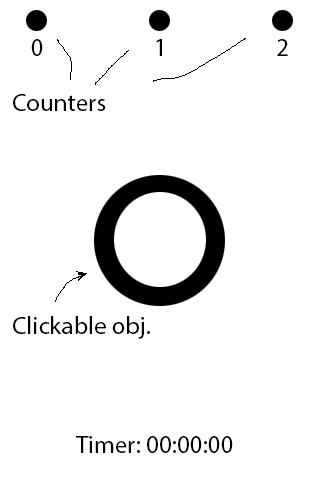
<style>
.page{position:relative;width:320px;height:480px;background:#ffffff}
.page>*{position:absolute;margin:0}
.t1{font:25px "MyriadPro-Regular";color:#000000}
</style>
<div class="page">
<p class="t1" style="left:31px;top:39px;width:12px;height:17px">0</p>
<p class="t1" style="left:156px;top:39px;width:6px;height:17px">1</p>
<p class="t1" style="left:277px;top:39px;width:11px;height:17px">2</p>
<p class="t1" style="left:13px;top:94px;width:93px;height:17px">Counters</p>
<p class="t1" style="left:13px;top:316px;width:137px;height:23px">Clickable obj.</p>
<p class="t1" style="left:76px;top:436px;width:157px;height:17px">Timer: 00:00:00</p>
</div>
